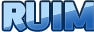
<style>
.page{position:relative;width:94px;height:32px}
.page>*{position:absolute;margin:0}
.t1{font:33.3px "KurokaneStd-EB";letter-spacing:-0.06em;font-weight:bold}
</style>
<div class="page">
<p class="t1" style="left:3px;top:2px;width:91px;height:29px">RUIM</p>
</div>
